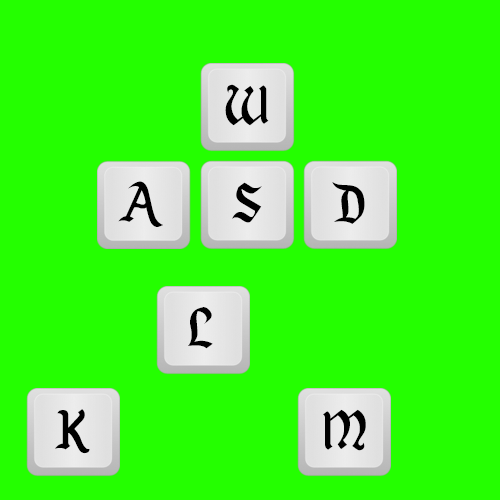
<style>
.page{position:relative;width:500px;height:500px;background:#24ff00}
.page>*{position:absolute;margin:0}
.t1{font:60px "EnchantedLand";color:#000000}
</style>
<div class="page">
<p class="t1" style="left:225px;top:84px;width:44px;height:42px">W</p>
<p class="t1" style="left:118px;top:181px;width:45px;height:46px">A</p>
<p class="t1" style="left:232px;top:182px;width:30px;height:41px">S</p>
<p class="t1" style="left:332px;top:182px;width:33px;height:42px">D</p>
<p class="t1" style="left:188px;top:307px;width:25px;height:42px">L</p>
<p class="t1" style="left:55px;top:409px;width:35px;height:45px">K</p>
<p class="t1" style="left:323px;top:409px;width:43px;height:42px">M</p>
</div>
